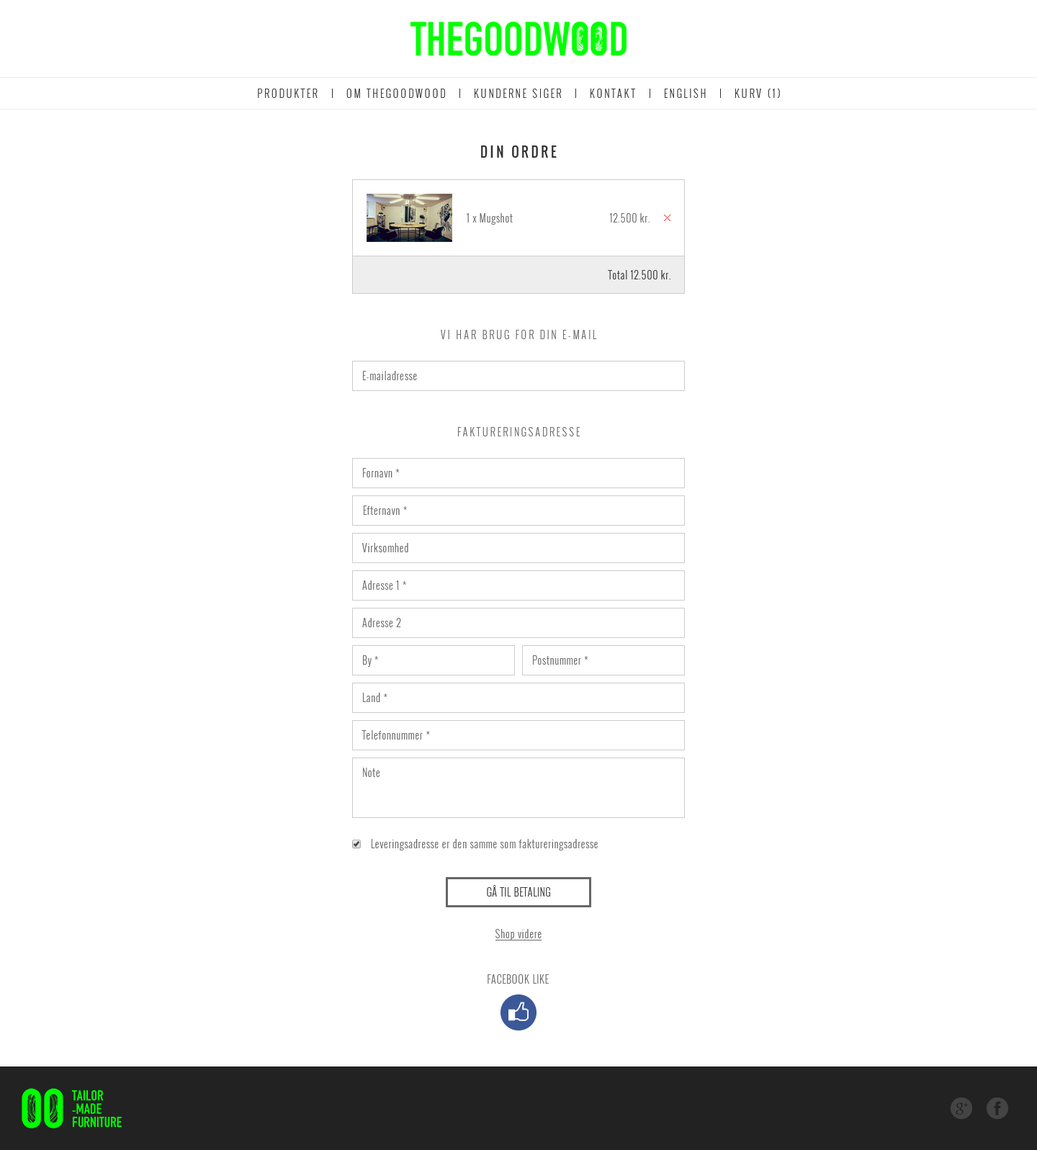
<style>
.page{position:relative;width:1037px;height:1150px;background:#ffffff}
.page>*{position:absolute;margin:0}
.t1{font:13px "Oswald-Regular";letter-spacing:0.2em;color:#333333;text-transform:uppercase}
.t2{font:10.1px "Oswald-Light";letter-spacing:0.05em;color:#666666}
.t3{font:10.1px "Oswald-Light";letter-spacing:0.05em;color:#333333}
.t4{font:10.1px "Oswald-Light";letter-spacing:0.2em;color:#666666;text-transform:uppercase}
.t5{font:10.1px "Oswald-Light";letter-spacing:0.05em;color:#333333;text-transform:uppercase}
</style>
<div class="page">
<p class="t1" style="left:481px;top:145px;width:76px;height:13px">Din ordre</p>
<p class="t2" style="left:467px;top:213px;width:46px;height:12px">1 x Mugshot</p>
<p class="t2" style="left:610px;top:213px;width:40px;height:10px">12.500 kr.</p>
<p class="t3" style="left:608px;top:270px;width:62px;height:9px">Total 12.500 kr.</p>
<p class="t4" style="left:441px;top:330px;width:156px;height:9px">Vi har brug for din e-mail</p>
<p class="t2" style="left:363px;top:371px;width:54px;height:9px">E-mailadresse</p>
<p class="t4" style="left:458px;top:427px;width:122px;height:9px">Faktureringsadresse</p>
<p class="t2" style="left:363px;top:468px;width:37px;height:9px">Fornavn *</p>
<p class="t2" style="left:364px;top:505px;width:43px;height:10px">Efternavn *</p>
<p class="t2" style="left:362px;top:543px;width:46px;height:9px">Virksomhed</p>
<p class="t2" style="left:362px;top:580px;width:44px;height:10px">Adresse 1 *</p>
<p class="t2" style="left:362px;top:618px;width:39px;height:9px">Adresse 2</p>
<p class="t2" style="left:363px;top:655px;width:15px;height:12px">By *</p>
<p class="t2" style="left:533px;top:655px;width:55px;height:10px">Postnummer *</p>
<p class="t2" style="left:363px;top:693px;width:24px;height:9px">Land *</p>
<p class="t2" style="left:361px;top:730px;width:69px;height:10px">Telefonnummer *</p>
<p class="t2" style="left:363px;top:768px;width:16px;height:9px">Note</p>
<p class="t2" style="left:372px;top:839px;width:226px;height:11px">Leveringsadresse er den samme som faktureringsadresse</p>
<p class="t5" style="left:487px;top:885px;width:63px;height:12px">Gå til betaling</p>
<p class="t2" style="left:495px;top:929px;width:47px;height:11px">Shop videre</p>
</div>
